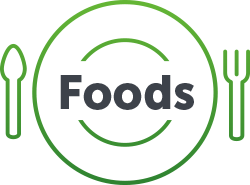
<style>
.page{position:relative;width:250px;height:185px;background:#ffffff}
.page>*{position:absolute;margin:0}
.t1{font:47.7px "MuseoSansCyrl-900";color:#3d424a}
</style>
<div class="page">
<p class="t1" style="left:60px;top:75px;width:134px;height:35px">Foods</p>
</div>
